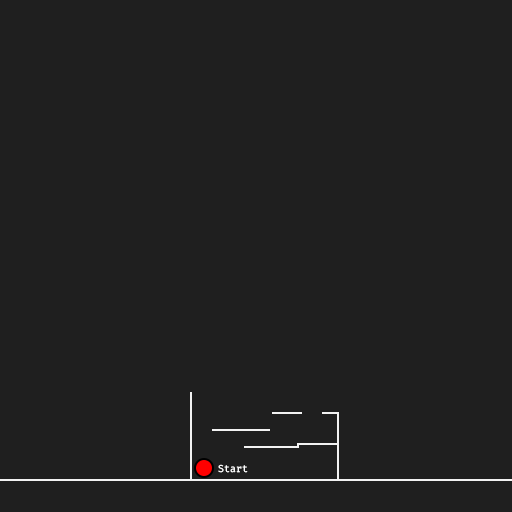
<style>
.page{position:relative;width:512px;height:512px;background:#1f1f1f}
.page>*{position:absolute;margin:0}
.t1{font:10px "FiraCode-Regular";color:#ffffff}
</style>
<div class="page">
<p class="t1" style="left:218px;top:464px;width:30px;height:9px">Start</p>
</div>
